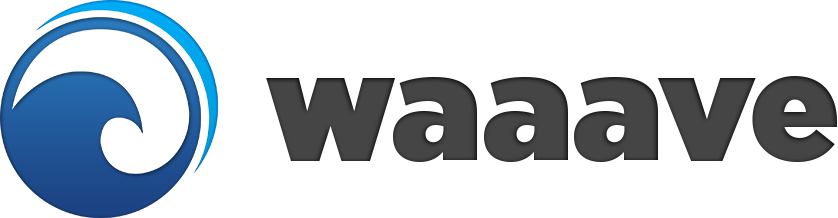
<style>
.page{position:relative;width:838px;height:218px;background:#ffffff}
.page>*{position:absolute;margin:0}
.t1{font:150px "Gotham-Ultra";color:#454545}
</style>
<div class="page">
<p class="t1" style="left:266px;top:76px;width:571px;height:86px">waaave</p>
</div>
